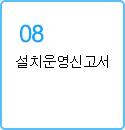
<style>
.page{position:relative;width:125px;height:130px;background:#ffffff}
.page>*{position:absolute;margin:0}
.t1{font:24px "ArialUnicodeMS";letter-spacing:-0.05em;color:#18a4f4}
.t2{font:14.7px "Dotum";letter-spacing:-0.1em;color:#000000}
</style>
<div class="page">
<p class="t1" style="left:20px;top:24px;width:24px;height:19px">08</p>
<p class="t2" style="left:16px;top:55px;width:92px;height:13px">설치운영신고서</p>
</div>
